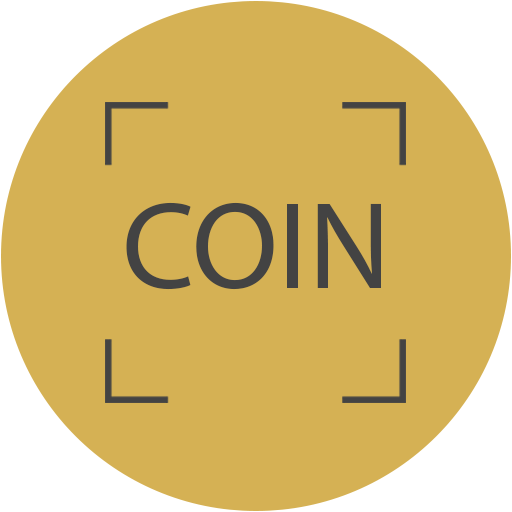
<style>
.page{position:relative;width:512px;height:512px;background:#d5b154}
.page>*{position:absolute;margin:0}
.t1{font:125px "MyriadPro-Regular";color:#434343}
</style>
<div class="page">
<p class="t1" style="left:126px;top:202px;width:255px;height:88px">COIN</p>
</div>
